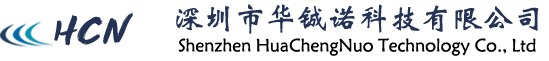
<style>
.page{position:relative;width:549px;height:61px;background:#ffffff}
.page>*{position:absolute;margin:0}
.t1{font:31px "STXinwei";color:#243256}
.t2{font:18px "STXinwei";color:#000000}
</style>
<div class="page">
<p class="t1" style="left:176px;top:4px;width:363px;height:30px">深圳市华铖诺科技有限公司</p>
<p class="t2" style="left:178px;top:38px;width:358px;height:18px">Shenzhen HuaChengNuo Technology Co., Ltd</p>
</div>
